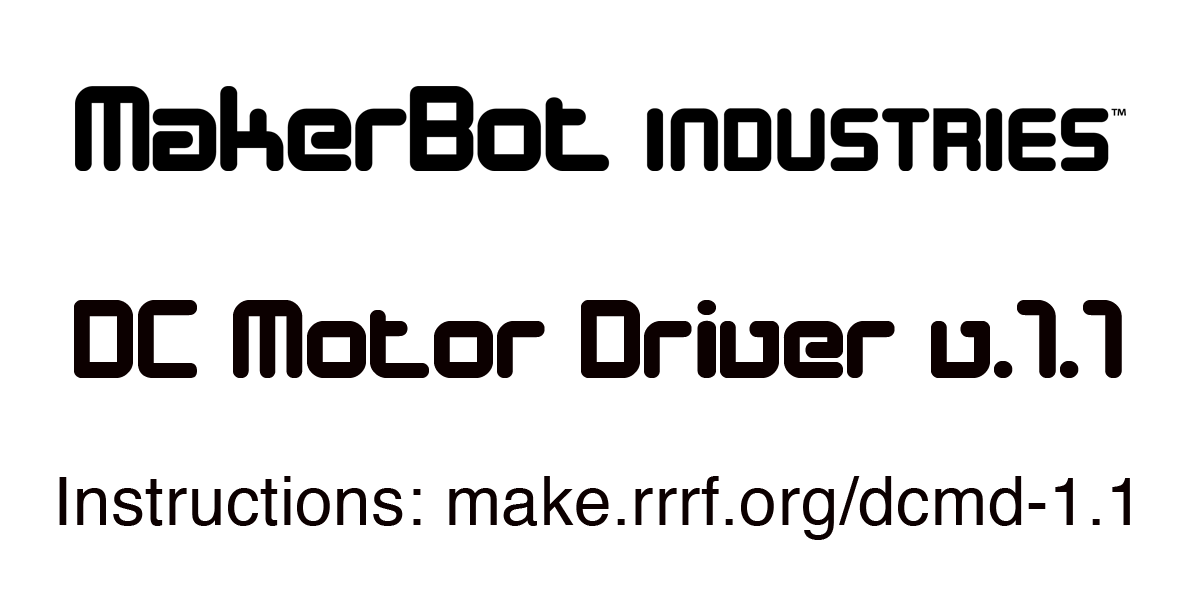
<style>
.page{position:relative;width:1200px;height:600px;background:#ffffff}
.page>*{position:absolute;margin:0}
.t1{font:114.5px "DesignerBlock";letter-spacing:0.01em;color:#0c0000}
.t2{font:67.4px "Helvetica";letter-spacing:0.01em;color:#0c0000}
</style>
<div class="page">
<p class="t1" style="left:74px;top:300px;width:1048px;height:78px">DC Motor Driver v.1.1</p>
<p class="t2" style="left:59px;top:476px;width:1071px;height:64px">Instructions: make.rrrf.org/dcmd-1.1</p>
</div>
